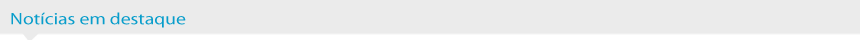
<style>
.page{position:relative;width:860px;height:40px;background:#ebebeb}
.page>*{position:absolute;margin:0}
.t1{font:16.7px "MyriadPro-Regular";color:#089dcb;scale:1.18 1}
</style>
<div class="page">
<p class="t1" style="left:11px;top:12px;width:175px;height:16px">Notícias em destaque</p>
</div>
